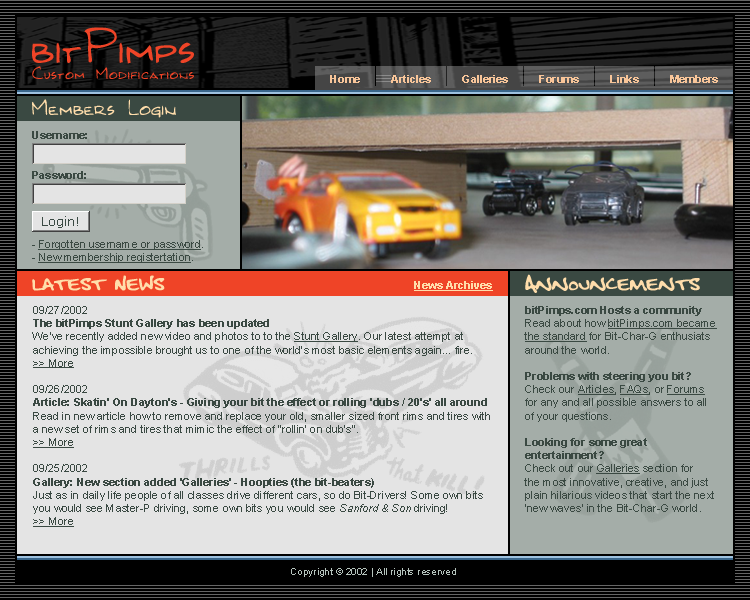
<style>
.page{position:relative;width:750px;height:600px;background:#e4e4e4}
.page>*{position:absolute;margin:0}
.t1{font:52px "Kilroy-WasHere";color:#ef4427}
.t2{font:18px "Kilroy-WasHere";letter-spacing:0.035em;color:#ef4427}
.t3{font:11px "Arial-BoldMT";color:#f8c599}
.t4{font:24px "Kilroy-WasHere";color:#ffddab}
.t5{font:11px "Arial-BoldMT";color:#3a4942}
.t6{font:11px "ArialMT";color:#3a4942;text-decoration:underline}
.t7{font:11px "ArialMT";color:#3a4942}
.t8{font:20px "FatboySlimBLTC(BRK)";color:#ffddab}
.t9{font:11px "Arial-BoldMT";color:#ffddab;text-decoration:underline}
.t10{font:11px "Arial-ItalicMT";color:#3a4942}
.t11{font:10px "ArialMT";color:#b6c4bd}
</style>
<div class="page">
<p class="t1" style="left:32px;top:27px;width:162px;height:37px">bitPimps</p>
<p class="t2" style="left:32px;top:66px;width:162px;height:14px">Custom Modifications</p>
<p class="t3" style="left:330px;top:75px;width:30px;height:8px">Home</p>
<p class="t3" style="left:391px;top:75px;width:40px;height:8px">Articles</p>
<p class="t3" style="left:462px;top:75px;width:46px;height:8px">Galleries</p>
<p class="t3" style="left:539px;top:75px;width:40px;height:8px">Forums</p>
<p class="t3" style="left:610px;top:75px;width:29px;height:8px">Links</p>
<p class="t3" style="left:670px;top:75px;width:48px;height:8px">Members</p>
<p class="t4" style="left:32px;top:99px;width:144px;height:19px">Members Login</p>
<p class="t5" style="left:32px;top:131px;width:55px;height:8px">Username:</p>
<p class="t5" style="left:32px;top:171px;width:54px;height:8px">Password:</p>
<p class="t6" style="left:32px;top:240px;width:171px;height:23px"><span class="t7">- </span>Forgotten username or password<span class="t7">.<br>- </span>New membership registertation<span class="t7">.</span></p>
<p class="t8" style="left:32px;top:275px;width:133px;height:16px">Latest News</p>
<p class="t9" style="left:414px;top:281px;width:79px;height:10px">News Archives</p>
<p class="t8" style="left:525px;top:274px;width:175px;height:19px">Announcements</p>
<p class="t7" style="left:32px;top:306px;width:458px;height:221px">09/27/2002<br><span class="t5">The bitPimps Stunt Gallery has been updated<br></span>We've recently added new video and photos to to the <span class="t6">Stunt Gallery</span>. Our latest attempt at<br>achieving the impossible brought us to one of the world's most basic elements again... fire.<br><span class="t6">&gt;&gt; More<br></span><br>09/26/2002<br><span class="t5">Article: Skatin' On Dayton's - Giving your bit the effect or rolling 'dubs / 20's' all around<br></span>Read in new article how to remove and replace your old, smaller sized front rims and tires with<br>a new set of rims and tires that mimic the effect of "rollin' on dub's".<br><span class="t6">&gt;&gt; More<br></span><br>09/25/2002<br><span class="t5">Gallery: New section added 'Galleries' - Hoopties (the bit-beaters)<br></span>Just as in daily life people of all classes drive different cars, so do Bit-Drivers! Some own bits<br>you would see Master-P driving, some own bits you would see <span class="t10">Sanford &amp; Son</span> driving!<br><span class="t6">&gt;&gt; More</span></p>
<p class="t7" style="left:524px;top:306px;width:193px;height:206px"><span class="t5">bitPimps.com Hosts a community<br></span>Read about how <span class="t6">bitPimps.com became<br>the standard</span> for Bit-Char-G enthusiats<br>around the world.<br><br><span class="t5">Problems with steering you bit?<br></span>Check our <span class="t6">Articles</span>, <span class="t6">FAQs</span>, or <span class="t6">Forums<br></span>for any and all possible answers to all<br>of your questions.<br><br><span class="t5">Looking for some great<br>entertainment?<br></span>Check out our <span class="t6">Galleries</span> section for<br>the most innovative, creative, and just<br>plain hilarious videos that start the next<br>'new waves' in the Bit-Char-G world.</p>
<p class="t11" style="left:291px;top:568px;width:165px;height:9px">Copyright © 2002 | All rights reserved</p>
</div>
